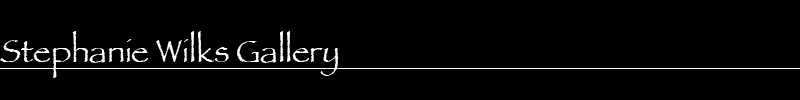
<style>
.page{position:relative;width:800px;height:100px;background:#000000}
.page>*{position:absolute;margin:0}
.t1{font:33px "Papyrus";letter-spacing:-0.005em;color:#ffffff}
</style>
<div class="page">
<p class="t1" style="left:0px;top:31px;width:339px;height:47px">Stephanie Wilks Gallery</p>
</div>
